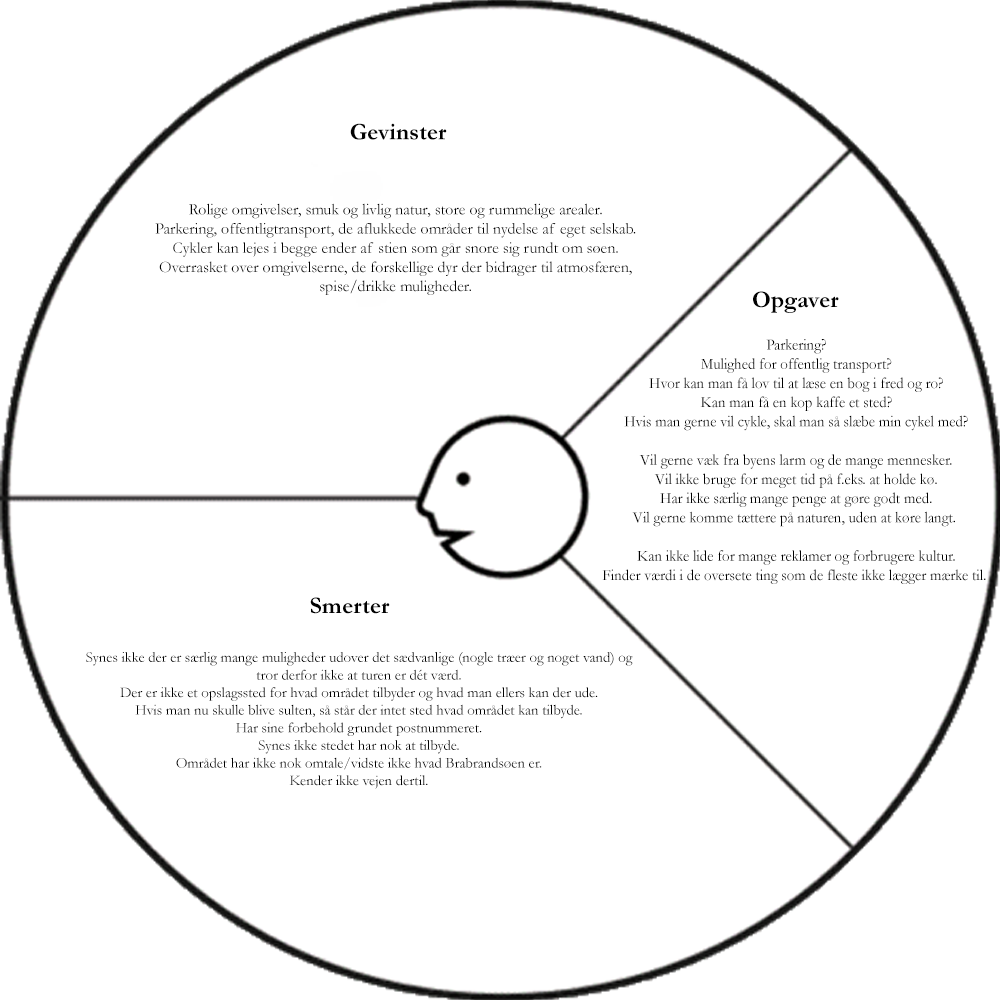
<style>
.page{position:relative;width:1000px;height:1000px;background:#ffffff}
.page>*{position:absolute;margin:0}
.t1{font:24px "Garamond-Bold";color:#010101}
.t2{font:16px "Garamond";color:#010101}
.t3{font:16px "Garamond";color:#010101;scale:0.93 1}
.t4{font:14.7px "Garamond";color:#010101}
</style>
<div class="page">
<p class="t1" style="left:350px;top:123px;width:97px;height:17px">Gevinster</p>
<p class="t2" style="left:155px;top:203px;width:481px;height:92px;text-align:center">Rolige omgivelser, smuk og livlig natur, store og rummelige arealer.<br>Parkering, offentligtransport, de aflukkede områder til nydelse af eget selskab.<br>Cykler kan lejes i begge ender af stien som går snore sig rundt om søen.<br>Overrasket over omgivelserne, de forskellige dyr der bidrager til atmosfæren, spise/drikke muligheder.</p>
<p class="t1" style="left:753px;top:291px;width:86px;height:22px">Opgaver</p>
<p class="t3" style="left:602px;top:339px;width:384px;height:245px;text-align:center">Parkering?<br>Mulighed for offentlig transport?<br>Hvor kan man få lov til at læse en bog i fred og ro?<br>Kan man få en kop kaffe et sted?<br>Hvis man gerne vil cykle, skal man så slæbe min cykel med?<br> <br>Vil gerne væk fra byens larm og de mange mennesker.<br>Vil ikke bruge for meget tid på f.eks. at holde kø.<br>Har ikke særlig mange penge at gøre godt med.<br>Vil gerne komme tættere på naturen, uden at køre langt. <br> <br>Kan ikke lide for mange reklamer og forbrugere kultur.<br>Finder værdi i de oversete ting som de fleste ikke lægger mærke til.</p>
<p class="t1" style="left:310px;top:597px;width:80px;height:17px">Smerter</p>
<p class="t4" style="left:86px;top:652px;width:547px;height:137px;text-align:center">Synes ikke der er særlig mange muligheder udover det sædvanlige (nogle træer og noget vand) og tror derfor ikke at turen er dét værd.<br>Der er ikke et opslagssted for hvad området tilbyder og hvad man ellers kan der ude.<br>Hvis man nu skulle blive sulten, så står der intet sted hvad området kan tilbyde.<br>Har sine forbehold grundet postnummeret.<br>Synes ikke stedet har nok at tilbyde.<br>Området har ikke nok omtale/vidste ikke hvad Brabrandsøen er.<br>Kender ikke vejen dertil.</p>
</div>
